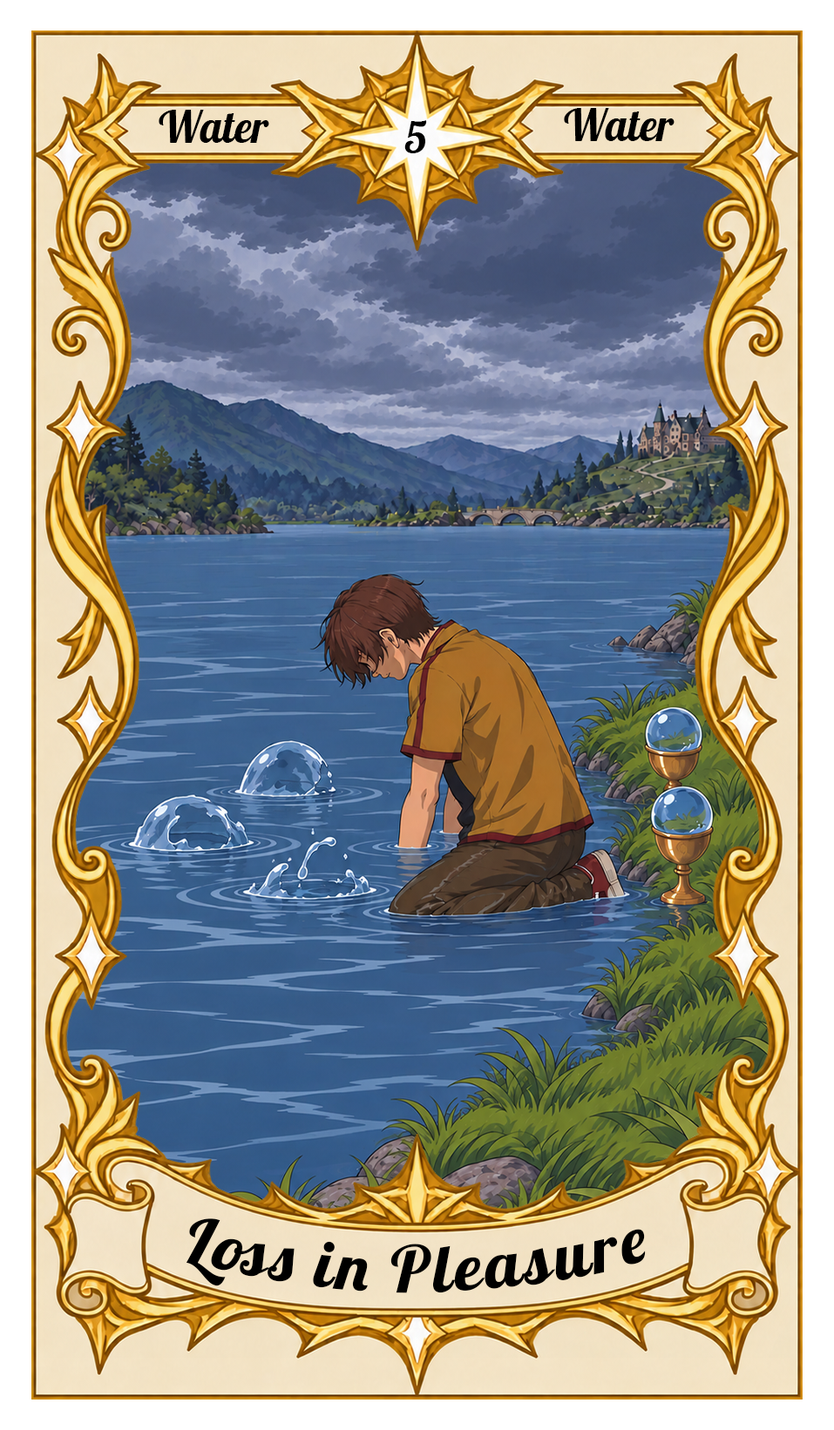
<style>
.page{position:relative;width:834px;height:1430px}
.page>*{position:absolute;margin:0}
.t1{font:43.6px "Lobster-Regular";color:#000000}
.t2{font:65.3px "Lobster-Regular";letter-spacing:0.05em;color:#000000}
</style>
<div class="page">
<p class="t1" style="left:159px;top:110px;width:110px;height:33px">Water</p>
<p class="t1" style="left:564px;top:108px;width:110px;height:33px">Water</p>
<p class="t1" style="left:404px;top:120px;width:23px;height:33px">5</p>
<p class="t2" style="left:186px;top:1219px;width:459px;height:75px">Loss in Pleasure</p>
</div>
